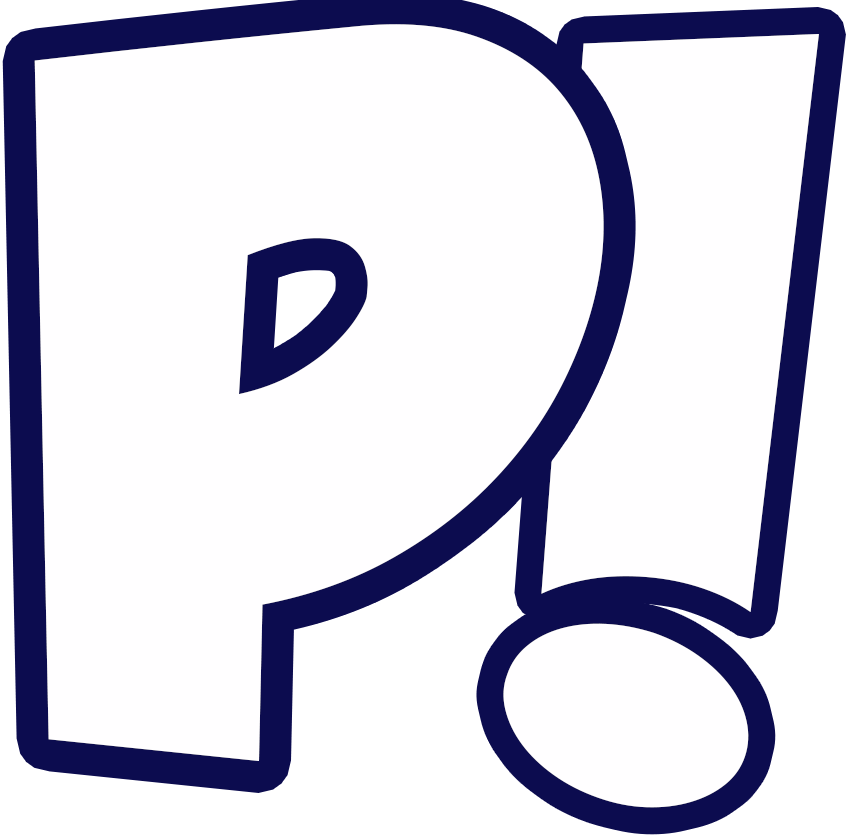
<style>
.page{position:relative;width:853px;height:835px;background:#fffeff}
.page>*{position:absolute;margin:0}
.t1{font:868.9px "GROBOLD";color:#fffeff}
.t2{font:794.7px "GROBOLD";color:#fffeff}
</style>
<div class="page">
<p class="t1" style="left:34px;top:24px;width:570px;height:737px">P</p>
<p class="t1" style="left:34px;top:36px;width:570px;height:737px">P</p>
<p class="t2" style="left:503px;top:34px;width:316px;height:774px">!</p>
<p class="t2" style="left:507px;top:41px;width:316px;height:774px">!</p>
</div>
